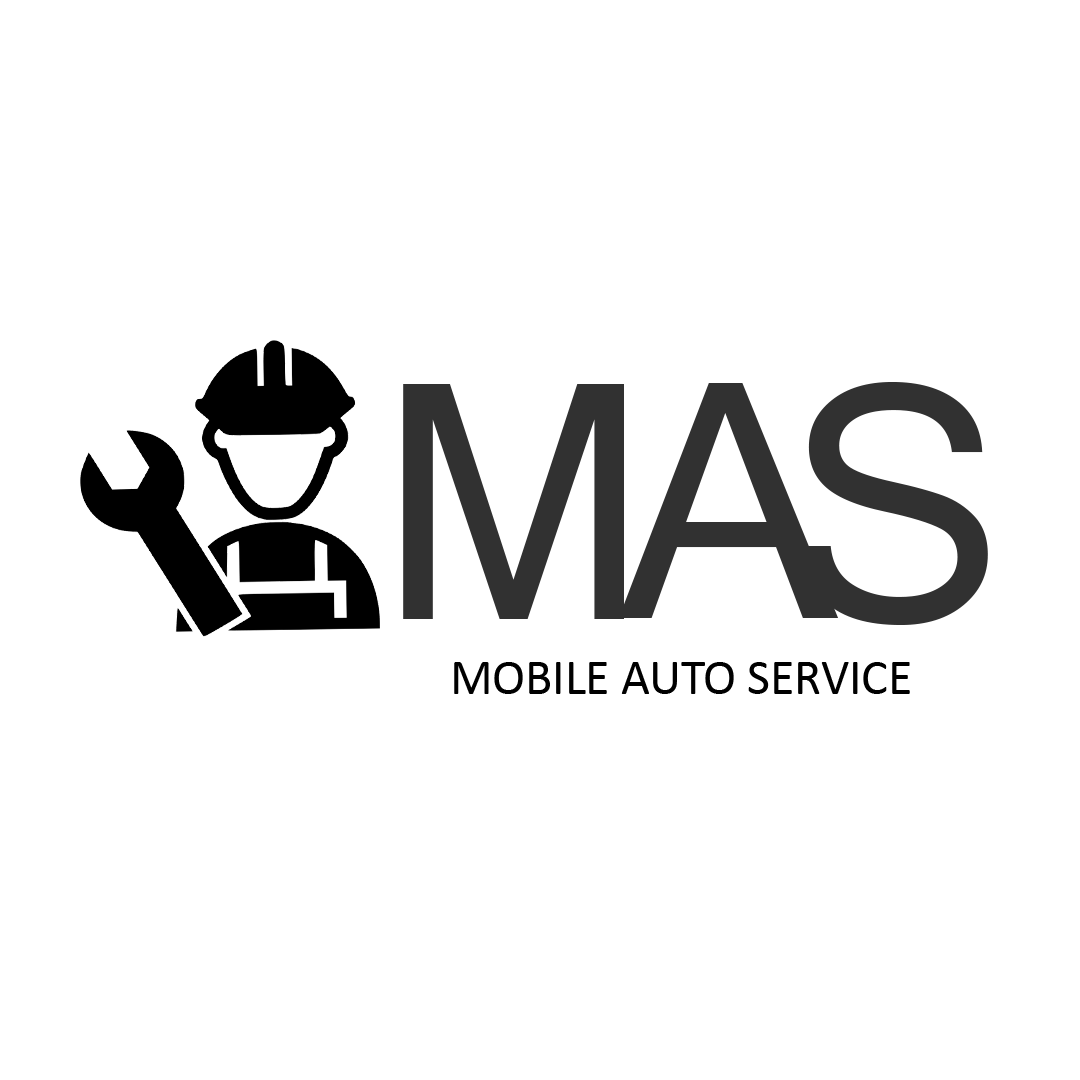
<style>
.page{position:relative;width:1080px;height:1080px;background:#ffffff}
.page>*{position:absolute;margin:0}
.t1{font:327.9px "MicrosoftSansSerif";color:#313131}
.t2{font:49.6px "Calibri";color:#000000}
</style>
<div class="page">
<p class="t1" style="left:403px;top:384px;width:221px;height:235px">M</p>
<p class="t1" style="left:618px;top:383px;width:221px;height:235px">A</p>
<p class="t1" style="left:800px;top:382px;width:188px;height:243px">S</p>
<p class="t2" style="left:454px;top:662px;width:456px;height:32px">MOBILE AUTO SERVICE</p>
</div>
